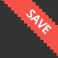
<style>
.page{position:relative;width:58px;height:58px;background:#333333}
.page>*{position:absolute;margin:0}
.t1{font:12px "OpenSans-Semibold";color:#ffffff}
</style>
<div class="page">
<p class="t1" style="left:26px;top:9px;width:26px;height:26px;rotate:45deg">SAVE</p>
</div>
